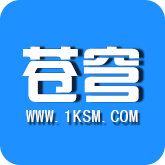
<style>
.page{position:relative;width:165px;height:165px;background:#1e90ff}
.page>*{position:absolute;margin:0}
.t1{font:60px "¹ã½Ý¾ÓÃÔÄã×Ö¿â";letter-spacing:0.02em;color:#ffffff}
.t2{font:18px "SimHei";letter-spacing:0.02em;color:#ffffff}
</style>
<div class="page">
<p class="t1" style="left:22px;top:46px;width:117px;height:56px">苍穹</p>
<p class="t2" style="left:26px;top:110px;width:112px;height:12px">WWW.1KSM.COM</p>
</div>
